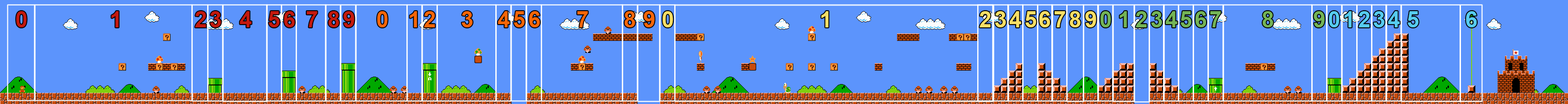
<style>
.page{position:relative;width:1568px;height:104px;background:#5c94fc}
.page>*{position:absolute;margin:0}
.t1{font:22.2px "Arial-BoldMT";letter-spacing:-0.1em;color:#c4190d}
.t2{font:22.2px "Arial-BoldMT";letter-spacing:-0.1em;color:#f56607}
.t3{font:22.2px "Arial-BoldMT";letter-spacing:-0.1em;color:#f7df66}
.t4{font:22.2px "Arial-BoldMT";letter-spacing:-0.1em;color:#74b456}
.t5{font:22.2px "Arial-BoldMT";letter-spacing:-0.1em;color:#56cbef}
</style>
<div class="page">
<p class="t1" style="left:16px;top:11px;width:11px;height:16px">0</p>
<p class="t1" style="left:111px;top:11px;width:8px;height:16px">1</p>
<p class="t1" style="left:195px;top:11px;width:11px;height:16px">2</p>
<p class="t1" style="left:210px;top:11px;width:11px;height:16px">3</p>
<p class="t1" style="left:240px;top:11px;width:12px;height:16px">4</p>
<p class="t1" style="left:269px;top:11px;width:11px;height:16px">5</p>
<p class="t1" style="left:284px;top:11px;width:11px;height:16px">6</p>
<p class="t1" style="left:307px;top:11px;width:10px;height:16px">7</p>
<p class="t1" style="left:329px;top:11px;width:10px;height:16px">8</p>
<p class="t1" style="left:343px;top:11px;width:11px;height:16px">9</p>
<p class="t2" style="left:377px;top:11px;width:11px;height:16px">0</p>
<p class="t2" style="left:410px;top:11px;width:7px;height:16px">1</p>
<p class="t2" style="left:424px;top:11px;width:11px;height:16px">2</p>
<p class="t2" style="left:462px;top:11px;width:11px;height:16px">3</p>
<p class="t2" style="left:498px;top:11px;width:12px;height:16px">4</p>
<p class="t2" style="left:514px;top:11px;width:11px;height:16px">5</p>
<p class="t2" style="left:529px;top:11px;width:11px;height:16px">6</p>
<p class="t2" style="left:577px;top:11px;width:11px;height:16px">7</p>
<p class="t2" style="left:625px;top:11px;width:10px;height:16px">8</p>
<p class="t2" style="left:644px;top:11px;width:11px;height:16px">9</p>
<p class="t3" style="left:663px;top:11px;width:10px;height:16px">0</p>
<p class="t3" style="left:821px;top:11px;width:7px;height:16px">1</p>
<p class="t3" style="left:980px;top:11px;width:11px;height:16px">2</p>
<p class="t3" style="left:995px;top:11px;width:11px;height:16px">3</p>
<p class="t3" style="left:1009px;top:11px;width:12px;height:16px">4</p>
<p class="t3" style="left:1025px;top:11px;width:12px;height:16px">5</p>
<p class="t3" style="left:1039px;top:11px;width:11px;height:16px">6</p>
<p class="t3" style="left:1055px;top:11px;width:10px;height:16px">7</p>
<p class="t3" style="left:1070px;top:11px;width:11px;height:16px">8</p>
<p class="t3" style="left:1085px;top:11px;width:11px;height:16px">9</p>
<p class="t4" style="left:1100px;top:11px;width:11px;height:16px">0</p>
<p class="t4" style="left:1119px;top:11px;width:8px;height:16px">1</p>
<p class="t4" style="left:1136px;top:11px;width:11px;height:16px">2</p>
<p class="t4" style="left:1151px;top:11px;width:11px;height:16px">3</p>
<p class="t4" style="left:1165px;top:11px;width:12px;height:16px">4</p>
<p class="t4" style="left:1181px;top:11px;width:11px;height:16px">5</p>
<p class="t4" style="left:1195px;top:11px;width:11px;height:16px">6</p>
<p class="t4" style="left:1210px;top:11px;width:11px;height:16px">7</p>
<p class="t4" style="left:1263px;top:11px;width:10px;height:16px">8</p>
<p class="t4" style="left:1314px;top:11px;width:11px;height:16px">9</p>
<p class="t5" style="left:1329px;top:11px;width:11px;height:16px">0</p>
<p class="t5" style="left:1344px;top:11px;width:8px;height:16px">1</p>
<p class="t5" style="left:1359px;top:11px;width:11px;height:16px">2</p>
<p class="t5" style="left:1373px;top:11px;width:12px;height:16px">3</p>
<p class="t5" style="left:1388px;top:11px;width:12px;height:16px">4</p>
<p class="t5" style="left:1408px;top:11px;width:11px;height:16px">5</p>
<p class="t5" style="left:1466px;top:11px;width:11px;height:16px">6</p>
</div>
